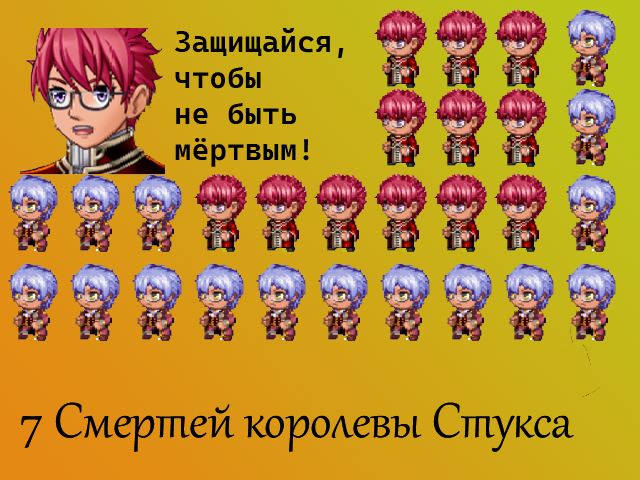
<style>
.page{position:relative;width:640px;height:480px}
.page>*{position:absolute;margin:0}
.t1{font:30px "CascadiaCodeRoman-SemiBold";color:#000000}
.t2{font:60px "Gabriola";color:#000000}
</style>
<div class="page">
<p class="t1" style="left:174px;top:28px;width:170px;height:139px">Защищайся, <br>чтобы <br>не быть <br>мёртвым!</p>
<p class="t2" style="left:21px;top:402px;width:553px;height:50px">7 Смертей королевы Стукса</p>
</div>
